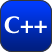
<style>
.page{position:relative;width:52px;height:52px}
.page>*{position:absolute;margin:0}
.t1{font:24px "Optima-Bold";letter-spacing:-0.025em;color:#ffffff}
</style>
<div class="page">
<p class="t1" style="left:4px;top:16px;width:43px;height:18px">C++</p>
</div>
